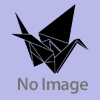
<style>
.page{position:relative;width:100px;height:100px;background:#b9baea}
.page>*{position:absolute;margin:0}
.t1{font:18px "MyriadPro-Semibold";letter-spacing:-0.025em;color:#777777}
</style>
<div class="page">
<p class="t1" style="left:18px;top:77px;width:70px;height:17px">No Image</p>
</div>
